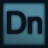
<style>
.page{position:relative;width:48px;height:48px;background:#06121c}
.page>*{position:absolute;margin:0}
.t1{font:30px "ArialMT";letter-spacing:-0.02em;color:#06121c;font-weight:bold}
</style>
<div class="page">
<p class="t1" style="left:7px;top:11px;width:35px;height:23px">Dn</p>
</div>
